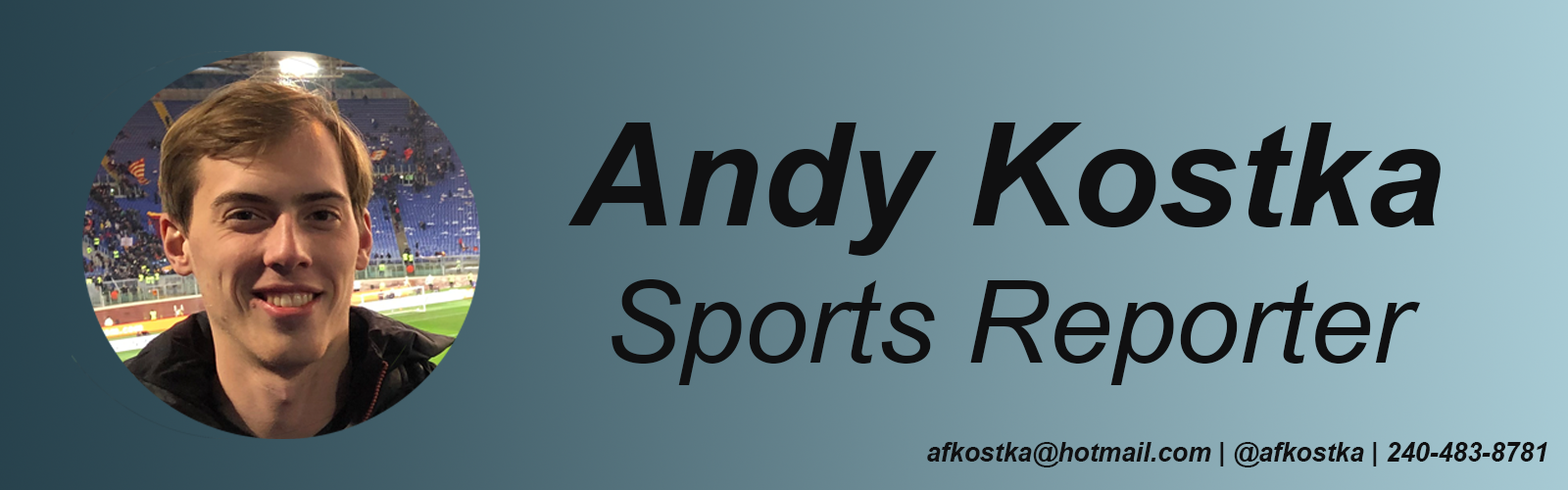
<style>
.page{position:relative;width:1568px;height:490px}
.page>*{position:absolute;margin:0}
.t1{font:114.3px "Arial-ItalicMT";color:#101011}
.t2{font:142.9px "Arial-BoldItalicMT";color:#101011}
.t3{font:26.1px "Arial-BoldItalicMT";color:#101011}
</style>
<div class="page">
<p class="t1" style="left:568px;top:122px;width:873px;height:263px;text-align:center"><span class="t2">Andy Kostka<br></span>Sports Reporter</p>
<p class="t3" style="left:927px;top:442px;width:620px;height:25px">afkostka@hotmail.com | @afkostka | 240-483-8781</p>
</div>
